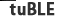
<style>
.page{position:relative;width:59px;height:16px;background:#ffffff}
.page>*{position:absolute;margin:0}
.t1{font:16px "AdobeGothicStd-Bold";color:#303030;font-weight:bold}
</style>
<div class="page">
<p class="t1" style="left:9px;top:2px;width:46px;height:14px">tuBLE</p>
</div>
